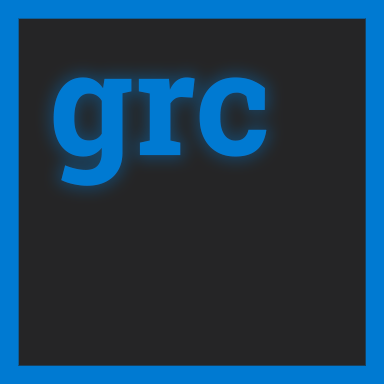
<style>
.page{position:relative;width:384px;height:384px;background:#252526}
.page>*{position:absolute;margin:0}
.t1{font:144px "RobotoSlab-Bold";color:#007ad2}
</style>
<div class="page">
<p class="t1" style="left:53px;top:77px;width:214px;height:109px">grc</p>
</div>
